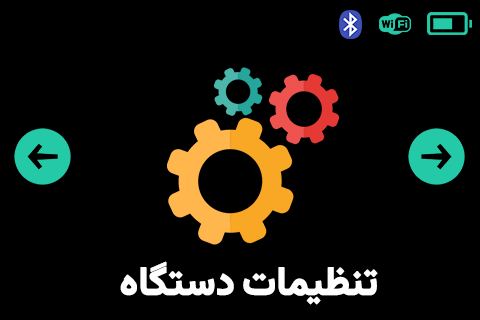
<style>
.page{position:relative;width:480px;height:320px;background:#000000}
.page>*{position:absolute;margin:0}
.t1{font:39.8px "Vazirmatn-Bold";letter-spacing:-0.01em;color:#fffefe;font-weight:bold;scale:0.94 1}
</style>
<div class="page">
<p class="t1" style="left:120px;top:261px;width:258px;height:44px">تنظیمات دستگاه</p>
</div>
